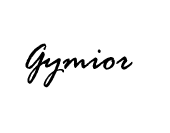
<style>
.page{position:relative;width:170px;height:133px;background:#ffffff}
.page>*{position:absolute;margin:0}
.t1{font:41.7px "RageItalic";color:#000000}
</style>
<div class="page">
<p class="t1" style="left:25px;top:43px;width:108px;height:45px">Gymior</p>
</div>
